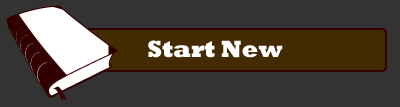
<style>
.page{position:relative;width:400px;height:107px;background:#333333}
.page>*{position:absolute;margin:0}
.t1{font:24px "Rockwell-ExtraBold";color:#ffffff}
</style>
<div class="page">
<p class="t1" style="left:148px;top:40px;width:135px;height:18px">Start New</p>
</div>
